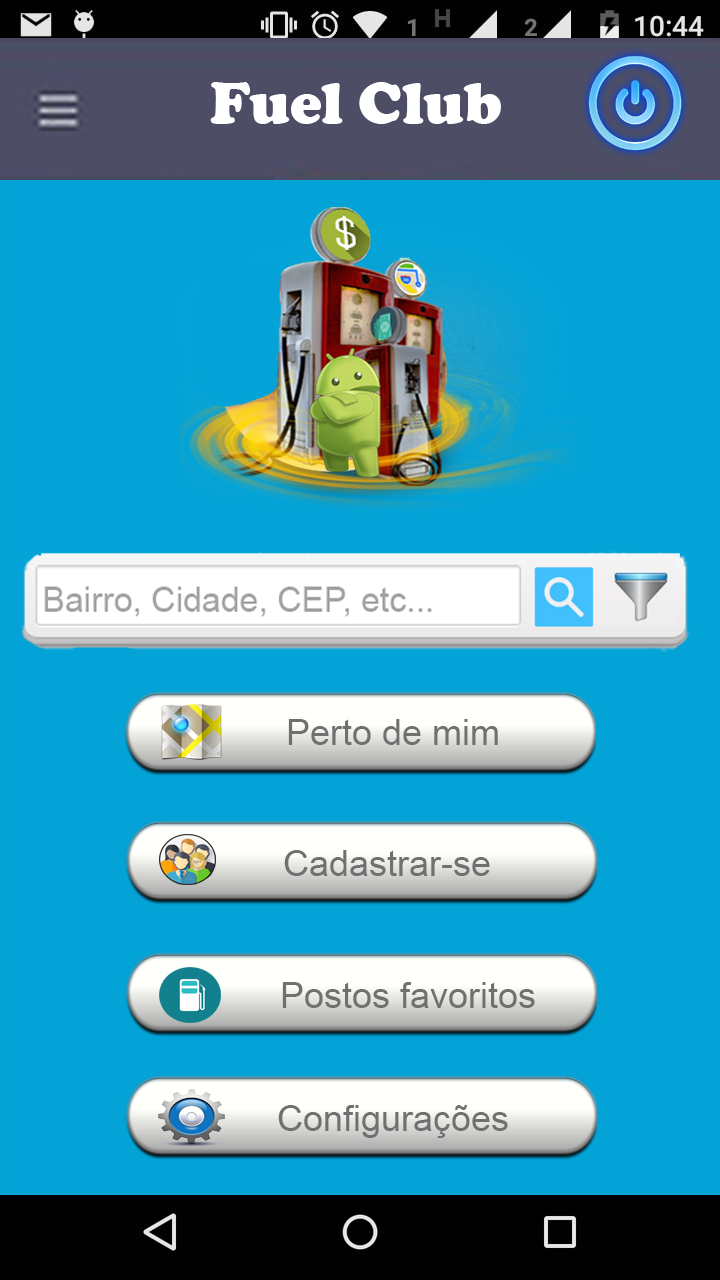
<style>
.page{position:relative;width:720px;height:1280px;background:#03a3d8}
.page>*{position:absolute;margin:0}
.t1{font:60px "CooperBlack";color:#ffffff}
.t2{font:36px "ArialMT";color:#707070}
</style>
<div class="page">
<p class="t1" style="left:210px;top:82px;width:291px;height:42px">Fuel Club</p>
<p class="t2" style="left:288px;top:719px;width:210px;height:26px">Perto de mim</p>
<p class="t2" style="left:284px;top:850px;width:206px;height:26px">Cadastrar-se</p>
<p class="t2" style="left:282px;top:982px;width:253px;height:26px">Postos favoritos</p>
<p class="t2" style="left:278px;top:1105px;width:230px;height:33px">Configurações</p>
</div>
